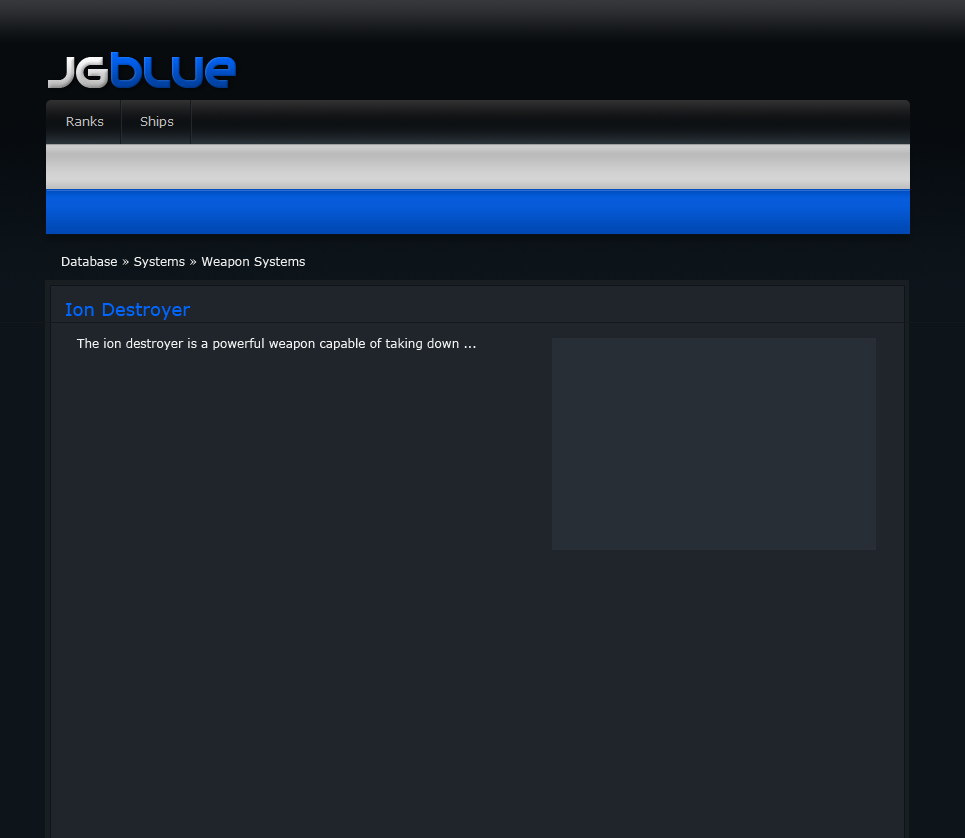
<style>
.page{position:relative;width:965px;height:838px;background:#20252b}
.page>*{position:absolute;margin:0}
.t1{font:12px "Verdana";color:#eeeeee}
.t2{font:18px "Verdana";color:#0066ff}
.t3{font:12px "Verdana";color:#f1f1f1}
</style>
<div class="page">
<p class="t1" style="left:62px;top:256px;width:243px;height:12px">Database » Systems » Weapon Systems</p>
<p class="t2" style="left:66px;top:303px;width:125px;height:17px">Ion Destroyer</p>
<p class="t3" style="left:76px;top:338px;width:400px;height:12px">The ion destroyer is a powerful weapon capable of taking down ...</p>
</div>
